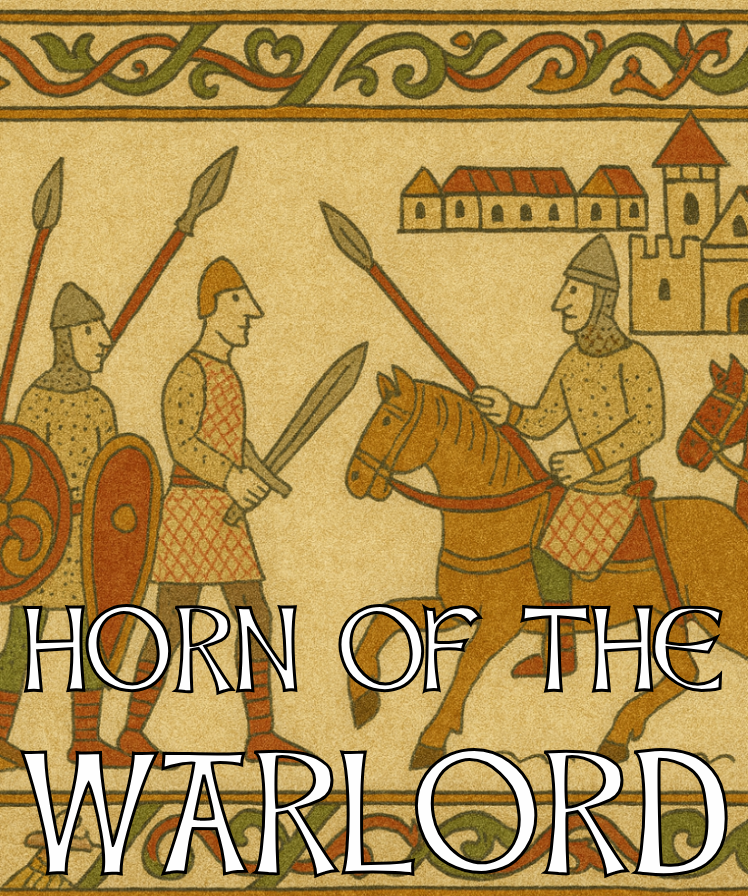
<style>
.page{position:relative;width:748px;height:896px}
.page>*{position:absolute;margin:0}
.t1{font:104.7px "CelticHand"}
.t2{font:151.3px "CelticHand"}
</style>
<div class="page">
<p class="t1" style="left:20px;top:603px;width:708px;height:276px">HORN OF THE <br><span class="t2">WARLORD</span></p>
</div>
